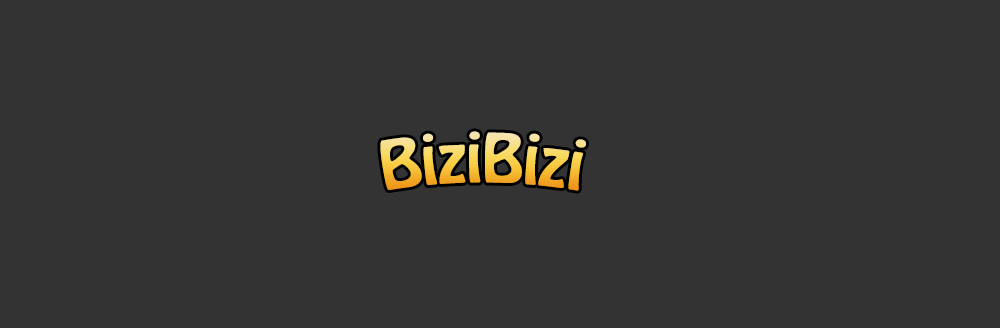
<style>
.page{position:relative;width:1000px;height:328px;background:#333333}
.page>*{position:absolute;margin:0}
.t1{font:60px "HoboStd";letter-spacing:-0.02em}
</style>
<div class="page">
<p class="t1" style="left:380px;top:131px;width:206px;height:60px">BiziBizi</p>
</div>
